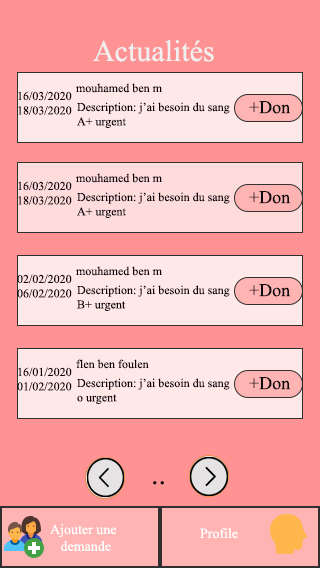
<style>
.page{position:relative;width:320px;height:568px;background:#ff9292}
.page>*{position:absolute;margin:0}
.t1{font:30px "TimesNewRomanPSMT";color:#f0f0f0}
.t2{font:12px "TimesNewRomanPSMT";color:#0c0109}
.t3{font:18px "TimesNewRomanPSMT";color:#0c0b0c}
.t4{font:30px "TimesNewRomanPSMT";color:#0c0109}
.t5{font:14px "TimesNewRomanPSMT";color:#ffffff}
</style>
<div class="page">
<p class="t1" style="left:93px;top:40px;width:121px;height:22px">Actualités</p>
<p class="t2" style="left:76px;top:83px;width:86px;height:10px">mouhamed ben m</p>
<p class="t2" style="left:18px;top:91px;width:54px;height:24px;text-align:right">16/03/2020<br>18/03/2020</p>
<p class="t2" style="left:77px;top:102px;width:153px;height:26px;text-align:right">Description: j’ai besoin du sang <br>A+ urgent</p>
<p class="t3" style="left:249px;top:101px;width:42px;height:13px">+Don</p>
<p class="t2" style="left:76px;top:173px;width:86px;height:10px">mouhamed ben m</p>
<p class="t2" style="left:18px;top:181px;width:54px;height:24px;text-align:right">16/03/2020<br>18/03/2020</p>
<p class="t2" style="left:77px;top:192px;width:153px;height:26px;text-align:right">Description: j’ai besoin du sang <br>A+ urgent</p>
<p class="t3" style="left:249px;top:191px;width:42px;height:13px">+Don</p>
<p class="t2" style="left:76px;top:266px;width:86px;height:10px">mouhamed ben m</p>
<p class="t2" style="left:17px;top:274px;width:55px;height:24px;text-align:right">02/02/2020<br>06/02/2020</p>
<p class="t2" style="left:77px;top:285px;width:153px;height:26px;text-align:right">Description: j’ai besoin du sang <br>B+ urgent</p>
<p class="t3" style="left:249px;top:284px;width:42px;height:13px">+Don</p>
<p class="t2" style="left:76px;top:359px;width:73px;height:10px">flen ben foulen</p>
<p class="t2" style="left:17px;top:367px;width:55px;height:24px;text-align:right">16/01/2020<br>01/02/2020</p>
<p class="t3" style="left:249px;top:377px;width:42px;height:13px">+Don</p>
<p class="t2" style="left:77px;top:378px;width:153px;height:26px;text-align:right">Description: j’ai besoin du sang <br>o urgent</p>
<p class="t4" style="left:153px;top:481px;width:11px;height:4px">..</p>
<p class="t5" style="left:50px;top:524px;width:67px;height:27px;text-align:right">Ajouter une <br>   demande</p>
<p class="t5" style="left:200px;top:528px;width:38px;height:11px">Profile</p>
</div>
